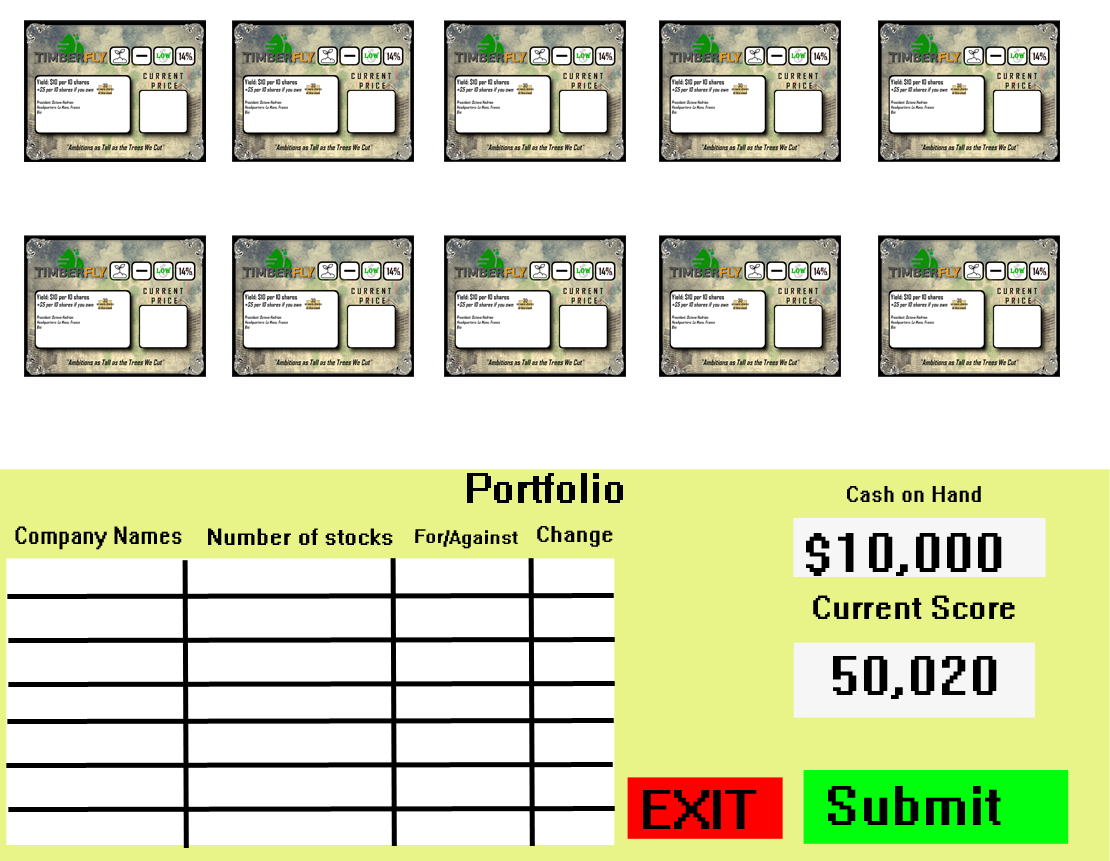
<style>
.page{position:relative;width:1110px;height:861px;background:#ffffff}
.page>*{position:absolute;margin:0}
.t1{font:38.4px "System";color:#000000}
.t2{font:20.4px "System";color:#000000;scale:0.94 1}
.t3{font:22.5px "System";color:#000000;scale:0.86 1}
.t4{font:21.2px "System";color:#000000}
.t5{font:17.6px "System";color:#000000;scale:1.04 1}
.t6{font:20.5px "System";color:#000000}
.t7{font:50px "System";color:#000000}
.t8{font:30px "System";color:#000000}
</style>
<div class="page">
<p class="t1" style="left:467px;top:473px;width:156px;height:30px">Portfolio</p>
<p class="t2" style="left:847px;top:486px;width:134px;height:16px">Cash on Hand</p>
<p class="t3" style="left:15px;top:526px;width:167px;height:24px">Company Names</p>
<p class="t4" style="left:208px;top:528px;width:185px;height:17px">Number of stocks</p>
<p class="t5" style="left:415px;top:529px;width:103px;height:20px;rotate:1deg">For/Against</p>
<p class="t6" style="left:537px;top:526px;width:76px;height:21px">Change</p>
<p class="t7" style="left:806px;top:533px;width:196px;height:43px">$10,000</p>
<p class="t8" style="left:813px;top:595px;width:202px;height:24px">Current Score</p>
<p class="t7" style="left:833px;top:656px;width:164px;height:43px">50,020</p>
<p class="t7" style="left:643px;top:790px;width:114px;height:39px">EXIT</p>
<p class="t7" style="left:828px;top:786px;width:173px;height:39px">Submit</p>
</div>
